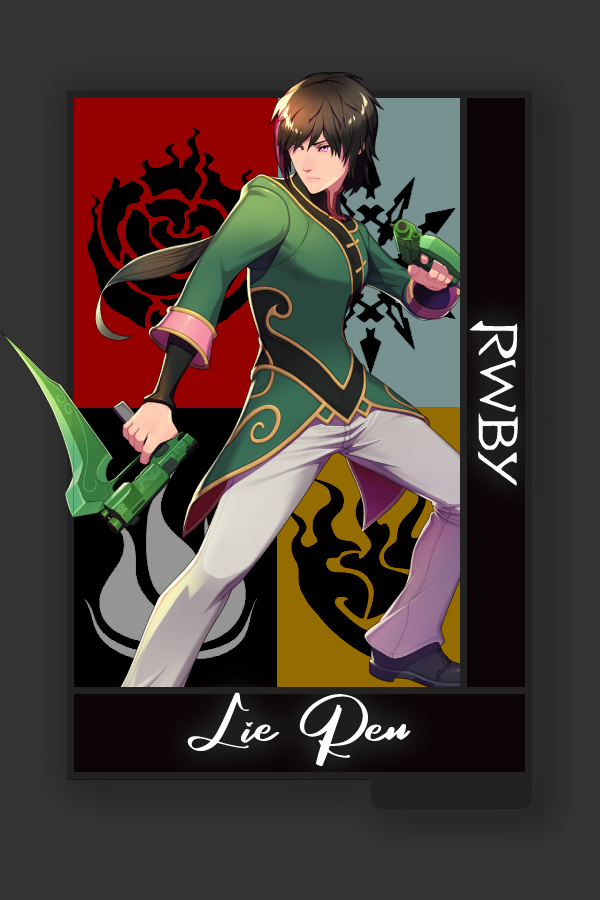
<style>
.page{position:relative;width:600px;height:900px;background:#333333}
.page>*{position:absolute;margin:0}
.t1{font:61.3px "RWBY_Style";color:#ffffff;scale:1.25 1}
.t2{font:75px "RosegaFREE";color:#ffffff}
</style>
<div class="page">
<p class="t1" style="left:469px;top:320px;width:49px;height:166px;rotate:90deg">RWBY</p>
<p class="t2" style="left:176px;top:692px;width:235px;height:75px">Lie Ren</p>
</div>
